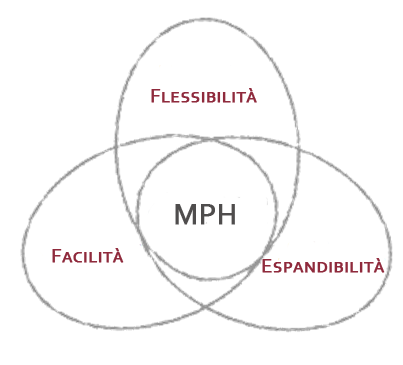
<style>
.page{position:relative;width:403px;height:365px;background:#ffffff}
.page>*{position:absolute;margin:0}
.t1{font:20px "Corbel";color:#8f2a3c;font-variant:small-caps;font-weight:bold}
.t2{font:30px "Corbel";color:#4f4d4d;font-variant:small-caps;font-weight:bold}
</style>
<div class="page">
<p class="t1" style="left:151px;top:88px;width:106px;height:15px">Flessibilità</p>
<p class="t2" style="left:175px;top:204px;width:60px;height:21px">MPH</p>
<p class="t1" style="left:52px;top:248px;width:72px;height:15px">Facilità</p>
<p class="t1" style="left:262px;top:258px;width:123px;height:15px">Espandibilità</p>
</div>
